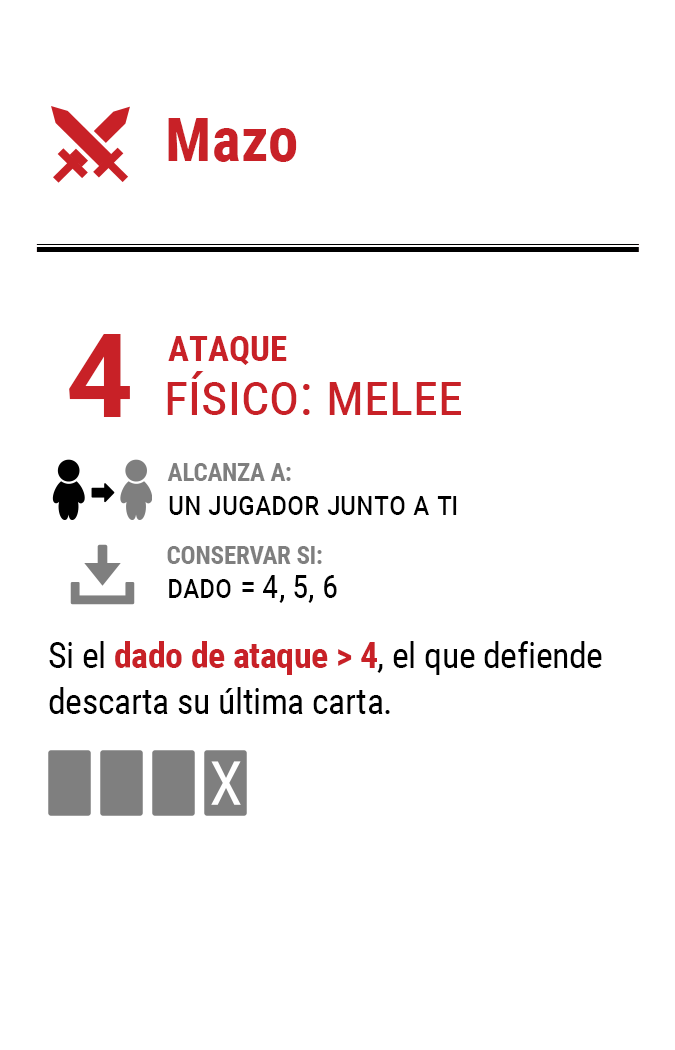
<style>
.page{position:relative;width:675px;height:1050px;background:#ffffff}
.page>*{position:absolute;margin:0}
.t1{font:61.2px "RobotoCondensed-Bold";color:#c82127}
.t2{font:116.7px "Roboto-Bold";letter-spacing:-0.16em;color:#c82127}
.t3{font:35px "RobotoCondensed-Bold";color:#c82127}
.t4{font:58.3px "RobotoCondensed-Regular";color:#c82127;font-variant:small-caps}
.t5{font:33.3px/33.3px "RobotoCondensed-Regular";letter-spacing:-0.01em;color:#000000;font-variant:small-caps}
.t6{font:25px/33.3px "RobotoCondensed-Bold";letter-spacing:-0.01em;color:#7f7f7f}
.t7{font:35.8px/45.8px "RobotoCondensed-Regular";letter-spacing:-0.01em;color:#000000}
.t8{font:35.8px/45.8px "RobotoCondensed-Bold";letter-spacing:-0.01em;color:#c82127}
</style>
<div class="page">
<p class="t1" style="left:168px;top:118px;width:129px;height:44px">Mazo</p>
<p class="t2" style="left:69px;top:334px;width:61px;height:83px">4</p>
<p class="t3" style="left:168px;top:336px;width:119px;height:29px">ATAQUE</p>
<p class="t4" style="left:167px;top:371px;width:294px;height:44px">físico: melee</p>
<p class="t5" style="left:167px;top:463px;width:290px;height:52px"><span class="t6">ALCANZA A:<br></span>un jugador junto a ti</p>
<p class="t5" style="left:167px;top:546px;width:170px;height:57px"><span class="t6">CONSERVAR SI:<br></span>dado = 4, 5, 6</p>
<p class="t7" style="left:49px;top:641px;width:553px;height:73px">Si el <span class="t8">dado de ataque &gt; 4</span>, el que defiende descarta su última carta.</p>
</div>
